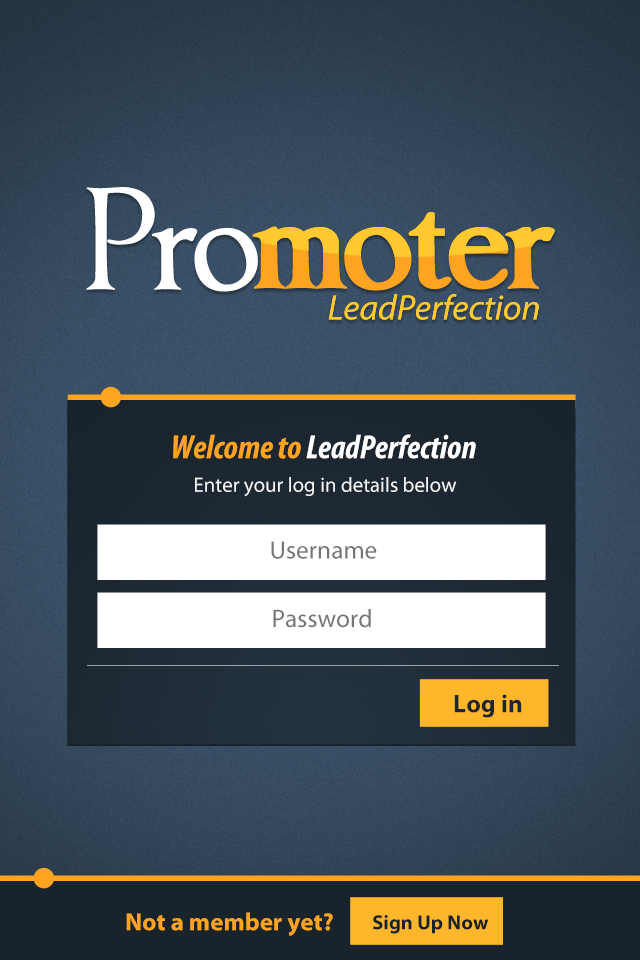
<style>
.page{position:relative;width:640px;height:960px}
.page>*{position:absolute;margin:0}
.t1{font:33.7px "MyriadPro-BoldCondIt";color:#ffffff}
.t2{font:33.7px "MyriadPro-BoldCondIt";color:#ffa421}
.t3{font:20.8px "MyriadPro-Regular";color:#f6f6f6}
.t4{font:25.4px "MyriadPro-Regular";color:#767676}
.t5{font:25.5px "MyriadPro-Bold";color:#1b2631}
.t6{font:24.9px "MyriadPro-Bold";color:#ffa421}
.t7{font:20.4px "MyriadPro-Bold";color:#17212a}
</style>
<div class="page">
<p class="t1" style="left:173px;top:434px;width:303px;height:25px"><span class="t2">Welcome to </span>LeadPerfection</p>
<p class="t3" style="left:195px;top:477px;width:262px;height:20px">Enter your log in details below</p>
<p class="t4" style="left:271px;top:541px;width:106px;height:18px">Username</p>
<p class="t4" style="left:273px;top:609px;width:98px;height:19px">Password</p>
<p class="t5" style="left:454px;top:694px;width:68px;height:24px">Log in</p>
<p class="t5" style="left:454px;top:694px;width:68px;height:24px">Log in</p>
<p class="t6" style="left:126px;top:912px;width:207px;height:24px">Not a member yet?</p>
<p class="t7" style="left:373px;top:915px;width:116px;height:19px">Sign Up Now</p>
<p class="t7" style="left:373px;top:915px;width:116px;height:19px">Sign Up Now</p>
</div>
